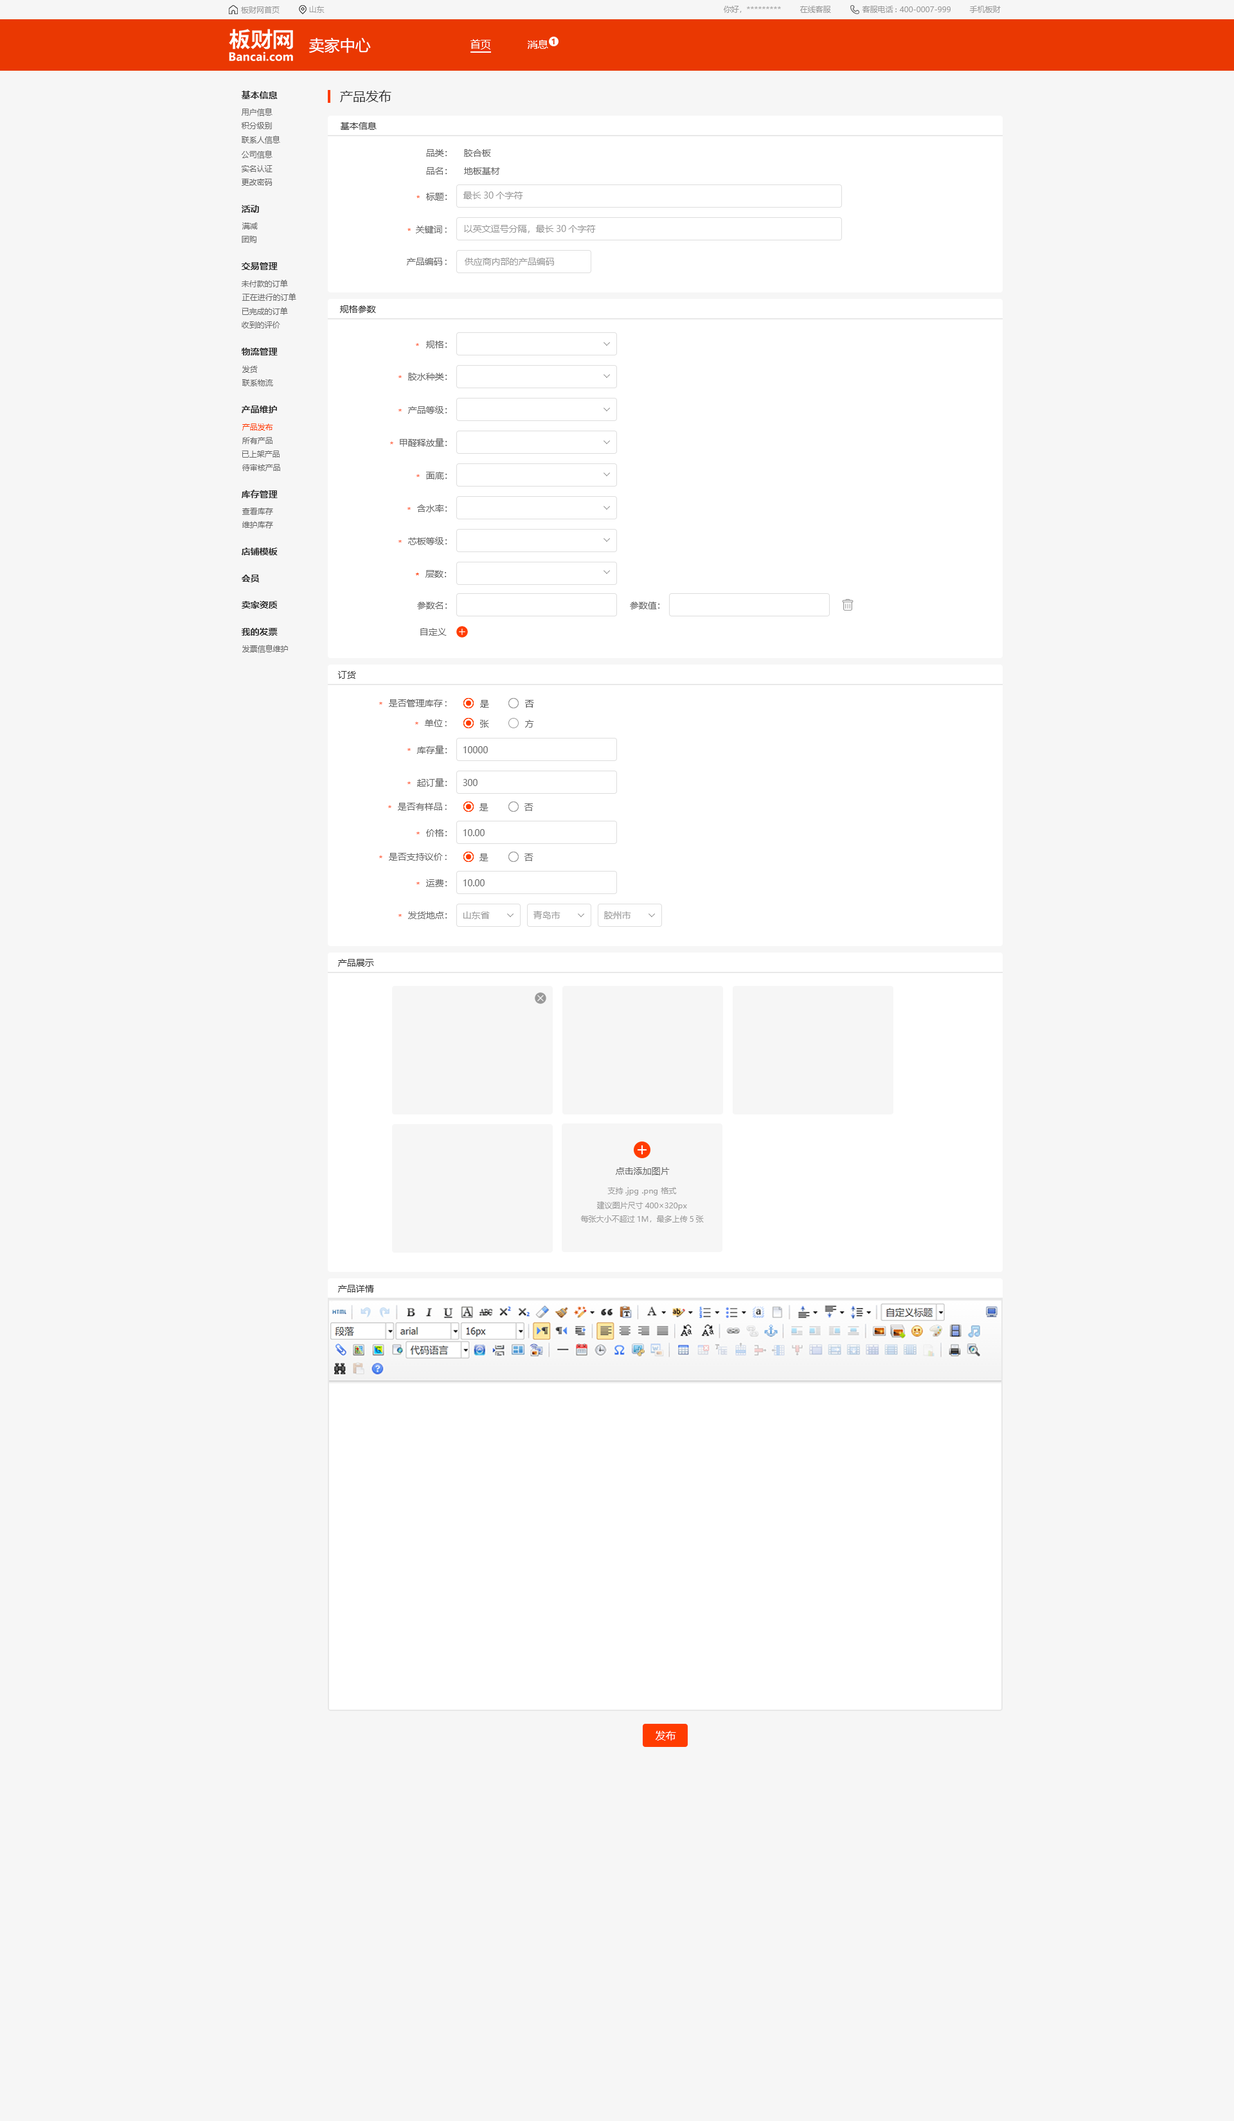
<style>
.page{position:relative;width:1234px;height:2121px;background:#f6f6f6}
.page>*{position:absolute;margin:0}
.t1{font:7.7px "MicrosoftYaHei";color:#999999}
.t2{font:15.4px "MicrosoftYaHei";color:#ffffff}
.t3{font:10.3px "MicrosoftYaHei";color:#ffffff}
.t4{font:7.7px "MicrosoftYaHei-Bold";color:#ea3802}
.t5{font:9px "MicrosoftYaHei-Bold";color:#333333}
.t6{font:12.9px "MicrosoftYaHei";color:#333333}
.t7{font:7.7px "MicrosoftYaHei";color:#666666}
.t8{font:9px "MicrosoftYaHei";color:#333333}
.t9{font:9px "MicrosoftYaHei";color:#666666}
.t10{font:7.7px "MicrosoftYaHei";color:#ff3c00}
.t11{font:9px "MicrosoftYaHei";color:#999999}
.t12{font:10.3px "MicrosoftYaHei";color:#fffefe}
</style>
<div class="page">
<p class="t1" style="left:309px;top:6px;width:16px;height:7px">山东</p>
<p class="t1" style="left:724px;top:6px;width:57px;height:7px">你好，*********</p>
<p class="t1" style="left:800px;top:6px;width:31px;height:7px">在线客服</p>
<p class="t1" style="left:862px;top:6px;width:89px;height:7px">客服电话: 400-0007-999</p>
<p class="t1" style="left:969px;top:6px;width:32px;height:7px">手机板财</p>
<p class="t1" style="left:241px;top:6px;width:39px;height:8px">板财网首页</p>
<p class="t2" style="left:309px;top:37px;width:62px;height:16px">卖家中心</p>
<p class="t3" style="left:471px;top:39px;width:20px;height:11px">首页</p>
<p class="t3" style="left:528px;top:40px;width:20px;height:9px">消息</p>
<p class="t4" style="left:552px;top:39px;width:3px;height:5px">1</p>
<p class="t5" style="left:242px;top:91px;width:36px;height:8px">基本信息</p>
<p class="t6" style="left:340px;top:90px;width:52px;height:12px">产品发布</p>
<p class="t7" style="left:242px;top:108px;width:31px;height:8px">用户信息</p>
<p class="t7" style="left:241px;top:122px;width:31px;height:7px">积分级别</p>
<p class="t8" style="left:341px;top:122px;width:36px;height:8px">基本信息</p>
<p class="t7" style="left:242px;top:136px;width:38px;height:8px">联系人信息</p>
<p class="t9" style="left:426px;top:149px;width:21px;height:8px">品类：</p>
<p class="t9" style="left:464px;top:149px;width:27px;height:8px">胶合板</p>
<p class="t7" style="left:242px;top:150px;width:31px;height:9px">公司信息</p>
<p class="t7" style="left:242px;top:165px;width:31px;height:7px">实名认证</p>
<p class="t9" style="left:426px;top:167px;width:21px;height:8px">品名：</p>
<p class="t9" style="left:464px;top:167px;width:36px;height:8px">地板基材</p>
<p class="t7" style="left:242px;top:179px;width:31px;height:7px">更改密码</p>
<p class="t10" style="left:417px;top:195px;width:3px;height:3px">*</p>
<p class="t9" style="left:426px;top:193px;width:21px;height:8px">标题：</p>
<p class="t11" style="left:463px;top:192px;width:60px;height:7px">最长30个字符</p>
<p class="t5" style="left:242px;top:205px;width:17px;height:8px">活动</p>
<p class="t7" style="left:242px;top:222px;width:16px;height:8px">满减</p>
<p class="t10" style="left:408px;top:228px;width:3px;height:3px">*</p>
<p class="t9" style="left:416px;top:226px;width:31px;height:7px">关键词:</p>
<p class="t11" style="left:464px;top:225px;width:132px;height:8px">以英文逗号分隔，最长30个字符</p>
<p class="t7" style="left:242px;top:236px;width:14px;height:7px">团购</p>
<p class="t9" style="left:407px;top:258px;width:40px;height:8px">产品编码:</p>
<p class="t11" style="left:465px;top:258px;width:89px;height:8px">供应商内部的产品编码</p>
<p class="t5" style="left:242px;top:262px;width:36px;height:8px">交易管理</p>
<p class="t7" style="left:242px;top:280px;width:46px;height:7px">未付款的订单</p>
<p class="t7" style="left:242px;top:293px;width:54px;height:8px">正在进行的订单</p>
<p class="t8" style="left:340px;top:305px;width:36px;height:8px">规格参数</p>
<p class="t7" style="left:242px;top:307px;width:46px;height:8px">已完成的订单</p>
<p class="t7" style="left:242px;top:321px;width:38px;height:7px">收到的评价</p>
<p class="t9" style="left:426px;top:341px;width:21px;height:7px">规格：</p>
<p class="t5" style="left:242px;top:348px;width:36px;height:8px">物流管理</p>
<p class="t10" style="left:416px;top:343px;width:3px;height:3px">*</p>
<p class="t7" style="left:242px;top:366px;width:16px;height:7px">发货</p>
<p class="t10" style="left:399px;top:375px;width:3px;height:3px">*</p>
<p class="t9" style="left:408px;top:373px;width:39px;height:8px">胶水种类：</p>
<p class="t7" style="left:242px;top:379px;width:31px;height:7px">联系物流</p>
<p class="t5" style="left:241px;top:406px;width:36px;height:7px">产品维护</p>
<p class="t10" style="left:399px;top:409px;width:3px;height:2px">*</p>
<p class="t9" style="left:408px;top:406px;width:39px;height:8px">产品等级：</p>
<p class="t10" style="left:242px;top:424px;width:31px;height:7px">产品发布</p>
<p class="t7" style="left:242px;top:437px;width:31px;height:7px">所有产品</p>
<p class="t10" style="left:390px;top:442px;width:3px;height:2px">*</p>
<p class="t9" style="left:400px;top:438px;width:47px;height:9px">甲醛释放量：</p>
<p class="t7" style="left:242px;top:451px;width:38px;height:7px">已上架产品</p>
<p class="t7" style="left:242px;top:464px;width:38px;height:7px">待审核产品</p>
<p class="t9" style="left:426px;top:472px;width:21px;height:8px">面底：</p>
<p class="t10" style="left:417px;top:474px;width:3px;height:3px">*</p>
<p class="t5" style="left:242px;top:490px;width:36px;height:8px">库存管理</p>
<p class="t7" style="left:242px;top:508px;width:31px;height:7px">查看库存</p>
<p class="t10" style="left:408px;top:507px;width:3px;height:3px">*</p>
<p class="t9" style="left:417px;top:505px;width:30px;height:7px">含水率：</p>
<p class="t7" style="left:242px;top:521px;width:31px;height:7px">维护库存</p>
<p class="t10" style="left:399px;top:540px;width:3px;height:3px">*</p>
<p class="t9" style="left:408px;top:537px;width:39px;height:8px">芯板等级：</p>
<p class="t5" style="left:242px;top:548px;width:36px;height:7px">店铺模板</p>
<p class="t5" style="left:242px;top:575px;width:18px;height:7px">会员</p>
<p class="t10" style="left:416px;top:573px;width:3px;height:2px">*</p>
<p class="t10" style="left:416px;top:573px;width:3px;height:2px">*</p>
<p class="t9" style="left:426px;top:570px;width:20px;height:8px">层数：</p>
<p class="t5" style="left:242px;top:601px;width:36px;height:8px">卖家资质</p>
<p class="t9" style="left:417px;top:602px;width:30px;height:7px">参数名：</p>
<p class="t9" style="left:630px;top:602px;width:30px;height:7px">参数值：</p>
<p class="t5" style="left:241px;top:628px;width:37px;height:8px">我的发票</p>
<p class="t9" style="left:420px;top:628px;width:27px;height:8px">自定义</p>
<p class="t7" style="left:242px;top:645px;width:46px;height:8px">发票信息维护</p>
<p class="t8" style="left:338px;top:671px;width:18px;height:8px">订货</p>
<p class="t10" style="left:379px;top:702px;width:3px;height:3px">*</p>
<p class="t9" style="left:389px;top:699px;width:58px;height:8px">是否管理库存:</p>
<p class="t9" style="left:480px;top:700px;width:9px;height:8px">是</p>
<p class="t9" style="left:480px;top:700px;width:9px;height:8px">是</p>
<p class="t9" style="left:525px;top:700px;width:9px;height:8px">否</p>
<p class="t9" style="left:525px;top:700px;width:9px;height:8px">否</p>
<p class="t10" style="left:415px;top:722px;width:4px;height:2px">*</p>
<p class="t9" style="left:424px;top:719px;width:23px;height:8px">单位:</p>
<p class="t9" style="left:480px;top:720px;width:9px;height:8px">张</p>
<p class="t9" style="left:525px;top:720px;width:9px;height:8px">方</p>
<p class="t10" style="left:408px;top:748px;width:3px;height:3px">*</p>
<p class="t9" style="left:417px;top:746px;width:30px;height:8px">库存量：</p>
<p class="t9" style="left:464px;top:746px;width:24px;height:7px">10000</p>
<p class="t10" style="left:408px;top:782px;width:3px;height:2px">*</p>
<p class="t9" style="left:417px;top:779px;width:30px;height:8px">起订量：</p>
<p class="t9" style="left:463px;top:779px;width:15px;height:7px">300</p>
<p class="t10" style="left:388px;top:806px;width:4px;height:2px">*</p>
<p class="t9" style="left:398px;top:803px;width:49px;height:8px">是否有样品:</p>
<p class="t9" style="left:480px;top:804px;width:9px;height:7px">是</p>
<p class="t9" style="left:525px;top:804px;width:9px;height:7px">否</p>
<p class="t10" style="left:417px;top:832px;width:3px;height:2px">*</p>
<p class="t9" style="left:426px;top:829px;width:21px;height:8px">价格：</p>
<p class="t9" style="left:464px;top:829px;width:21px;height:7px">10.00</p>
<p class="t10" style="left:379px;top:856px;width:3px;height:2px">*</p>
<p class="t9" style="left:389px;top:853px;width:58px;height:8px">是否支持议价:</p>
<p class="t9" style="left:480px;top:854px;width:9px;height:7px">是</p>
<p class="t9" style="left:525px;top:854px;width:9px;height:7px">否</p>
<p class="t9" style="left:426px;top:879px;width:21px;height:8px">运费：</p>
<p class="t9" style="left:464px;top:879px;width:21px;height:8px">10.00</p>
<p class="t10" style="left:417px;top:882px;width:3px;height:3px">*</p>
<p class="t10" style="left:399px;top:914px;width:3px;height:3px">*</p>
<p class="t9" style="left:408px;top:912px;width:39px;height:7px">发货地点：</p>
<p class="t11" style="left:464px;top:912px;width:26px;height:7px">山东省</p>
<p class="t11" style="left:534px;top:911px;width:27px;height:8px">青岛市</p>
<p class="t11" style="left:604px;top:912px;width:27px;height:7px">胶州市</p>
<p class="t8" style="left:338px;top:959px;width:36px;height:8px">产品展示</p>
<p class="t9" style="left:616px;top:1167px;width:54px;height:9px">点击添加图片</p>
<p class="t1" style="left:608px;top:1187px;width:69px;height:9px">支持.jpg .png 格式</p>
<p class="t1" style="left:597px;top:1202px;width:90px;height:8px">建议图片尺寸400×320px</p>
<p class="t1" style="left:580px;top:1216px;width:124px;height:7px">每张大小不超过1M，最多上传5张</p>
<p class="t8" style="left:338px;top:1285px;width:36px;height:8px">产品详情</p>
<p class="t12" style="left:656px;top:1731px;width:20px;height:10px">发布</p>
</div>
